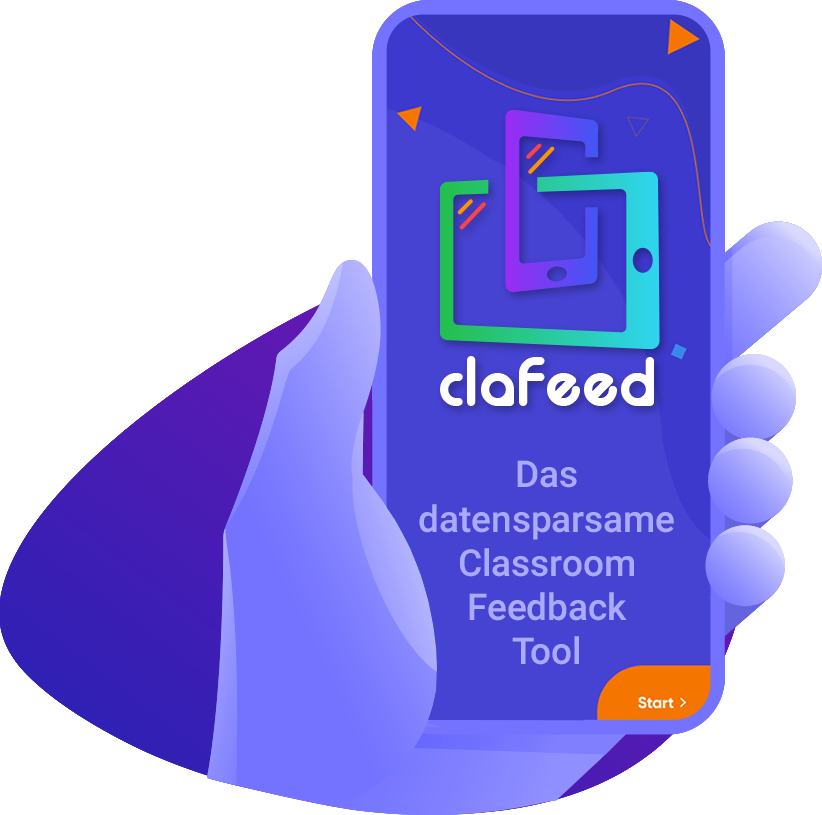
<style>
.page{position:relative;width:822px;height:815px;background:#ffffff}
.page>*{position:absolute;margin:0}
.t1{font:36.9px "Roboto-Medium";color:#aaaaff}
</style>
<div class="page">
<p class="t1" style="left:419px;top:460px;width:255px;height:205px;text-align:center">Das<br>datensparsame<br>Classroom<br>Feedback<br>Tool</p>
</div>
